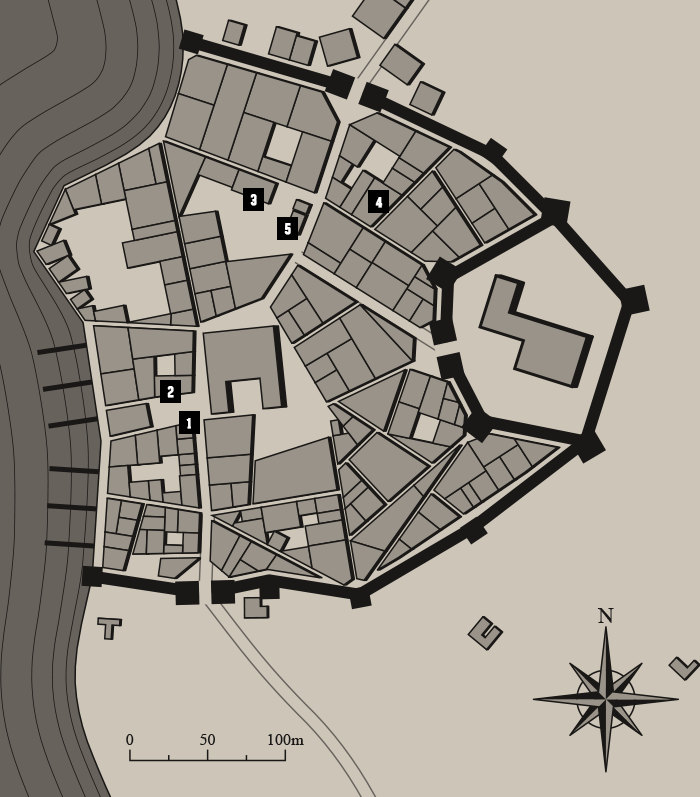
<style>
.page{position:relative;width:700px;height:797px;background:#ccc5b8}
.page>*{position:absolute;margin:0}
.t1{font:14px "GearedSlab-Extrabold";color:#fefeff;font-weight:bold}
</style>
<div class="page">
<p class="t1" style="left:250px;top:194px;width:7px;height:12px">3</p>
<p class="t1" style="left:375px;top:197px;width:8px;height:11px">4</p>
<p class="t1" style="left:284px;top:223px;width:7px;height:12px">5</p>
<p class="t1" style="left:167px;top:386px;width:7px;height:12px">2</p>
<p class="t1" style="left:186px;top:418px;width:5px;height:11px">1</p>
</div>
